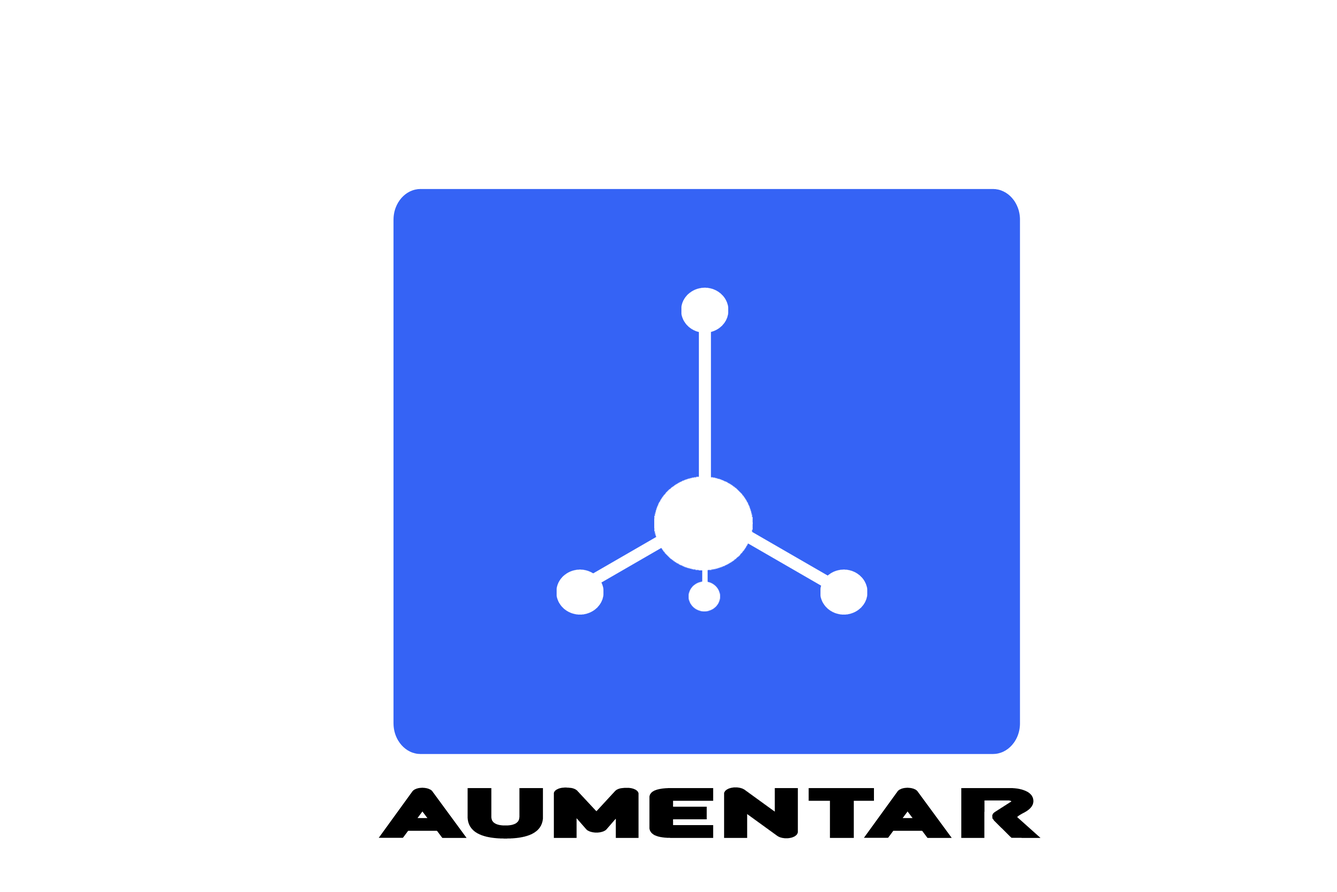
<style>
.page{position:relative;width:1337px;height:892px;background:#ffffff}
.page>*{position:absolute;margin:0}
.t1{font:69.1px "QueenofCamelot";color:#000000;font-weight:bold;scale:1.94 1}
</style>
<div class="page">
<p class="t1" style="left:379px;top:787px;width:662px;height:52px">AUMENTAR</p>
</div>
